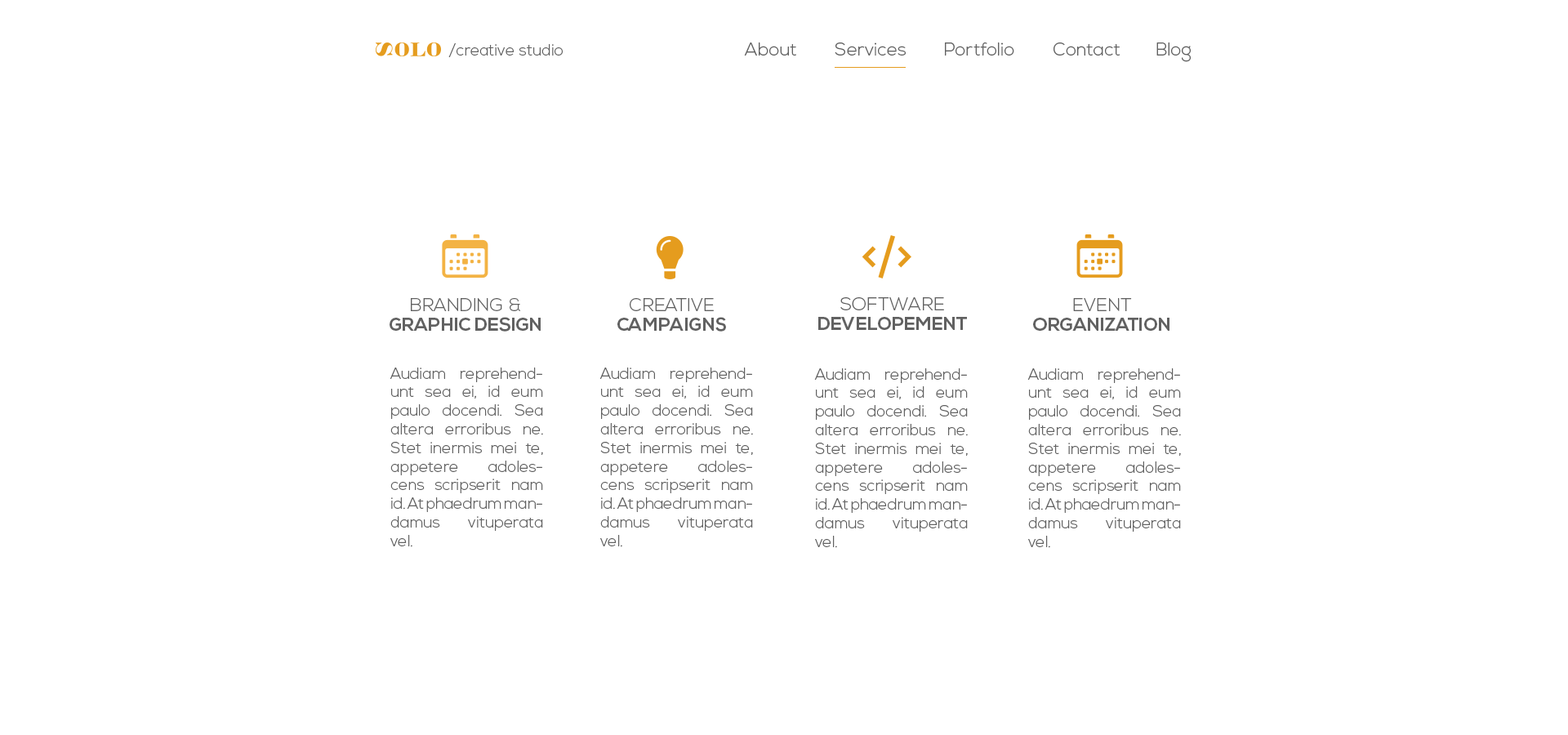
<style>
.page{position:relative;width:1568px;height:735px;background:#ffffff}
.page>*{position:absolute;margin:0}
.t1{font:15.7px "NexaLight";color:#616161}
.t2{font:18.2px "NexaLight";color:#616161}
.t3{font:18.5px/19.6px "NexaBold";color:#616161}
.t4{font:18.5px/19.6px "NexaLight";color:#616161}
.t5{font:18.4px/19.6px "NexaBold";color:#616161}
.t6{font:18.4px/19.6px "NexaLight";color:#616161}
.t7{font:15.5px "NexaLight";color:#616161}
</style>
<div class="page">
<p class="t1" style="left:448px;top:43px;width:115px;height:14px">/creative studio</p>
<p class="t2" style="left:744px;top:42px;width:52px;height:14px">About</p>
<p class="t2" style="left:835px;top:42px;width:71px;height:14px">Services</p>
<p class="t2" style="left:945px;top:42px;width:69px;height:14px">Portfolio</p>
<p class="t2" style="left:1054px;top:42px;width:66px;height:14px">Contact</p>
<p class="t2" style="left:1156px;top:42px;width:35px;height:20px">Blog</p>
<p class="t3" style="left:390px;top:298px;width:151px;height:34px;text-align:center"><span class="t4">BRANDING &amp;<br></span>GRAPHIC DESIGN</p>
<p class="t3" style="left:617px;top:298px;width:109px;height:34px;text-align:center"><span class="t4">CREATIVE<br></span>CAMPAIGNS</p>
<p class="t5" style="left:818px;top:297px;width:149px;height:33px;text-align:center"><span class="t6">SOFTWARE<br></span>DEVELOPEMENT</p>
<p class="t3" style="left:1033px;top:298px;width:136px;height:33px;text-align:center"><span class="t4">EVENT<br></span>ORGANIZATION</p>
<p class="t7" style="left:390px;top:368px;width:153px;height:179px;text-align:justify">Audiam reprehendunt sea ei, id eum paulo docendi. Sea altera erroribus ne. Stet inermis mei te, appetere adolescens scripserit nam id. At phaedrum mandamus vituperata vel.</p>
<p class="t7" style="left:599px;top:368px;width:154px;height:179px;text-align:justify">Audiam reprehendunt sea ei, id eum paulo docendi. Sea altera erroribus ne. Stet inermis mei te, appetere adolescens scripserit nam id. At phaedrum mandamus vituperata vel.</p>
<p class="t7" style="left:814px;top:368px;width:154px;height:180px;text-align:justify">Audiam reprehendunt sea ei, id eum paulo docendi. Sea altera erroribus ne. Stet inermis mei te, appetere adolescens scripserit nam id. At phaedrum mandamus vituperata vel.</p>
<p class="t7" style="left:1027px;top:368px;width:154px;height:180px;text-align:justify">Audiam reprehendunt sea ei, id eum paulo docendi. Sea altera erroribus ne. Stet inermis mei te, appetere adolescens scripserit nam id. At phaedrum mandamus vituperata vel.</p>
</div>
